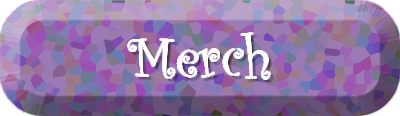
<style>
.page{position:relative;width:400px;height:116px}
.page>*{position:absolute;margin:0}
.t1{font:58px "CurlzMT";color:#ffffff}
</style>
<div class="page">
<p class="t1" style="left:128px;top:32px;width:142px;height:48px">Merch</p>
</div>
